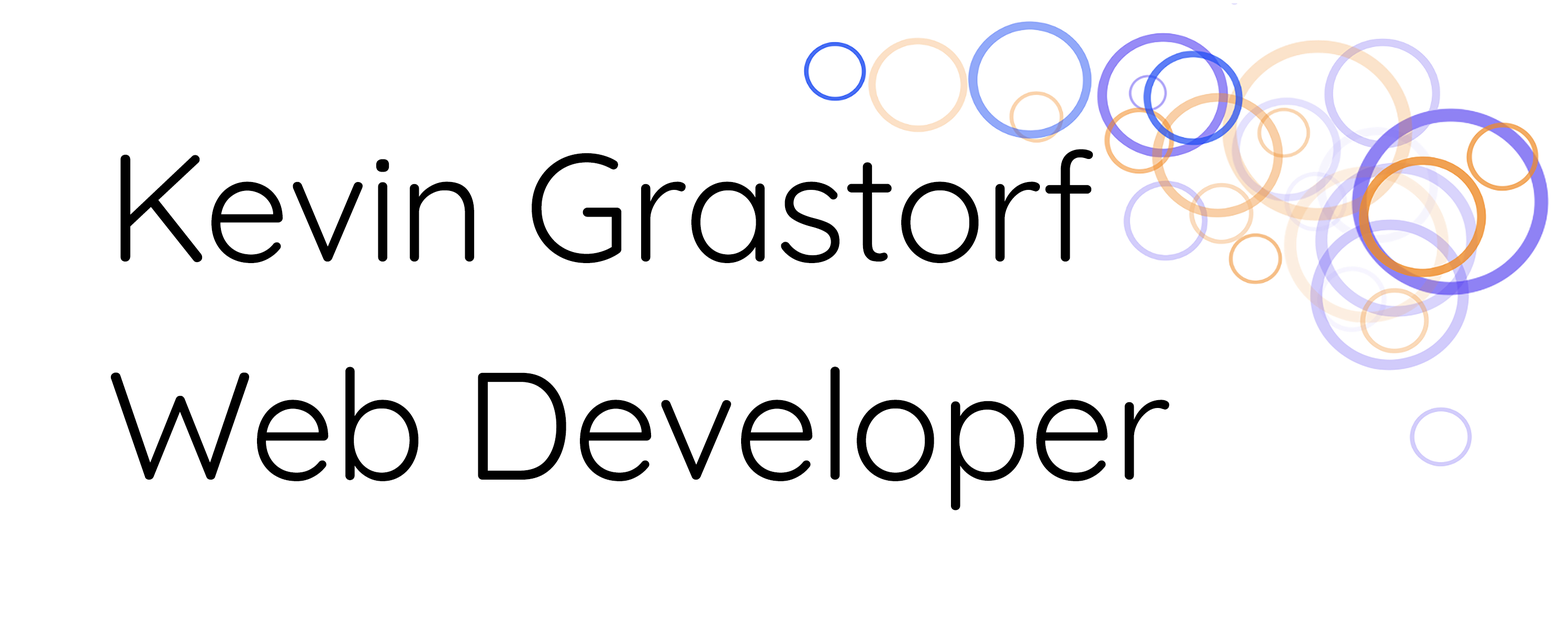
<style>
.page{position:relative;width:1568px;height:624px;background:#ffffff}
.page>*{position:absolute;margin:0}
.t1{font:152.6px/218.1px "Quicksand-Regular";letter-spacing:-0.01em;color:#000000}
</style>
<div class="page">
<p class="t1" style="left:110px;top:149px;width:1059px;height:362px">Kevin Grastorf<br>Web Developer</p>
</div>
